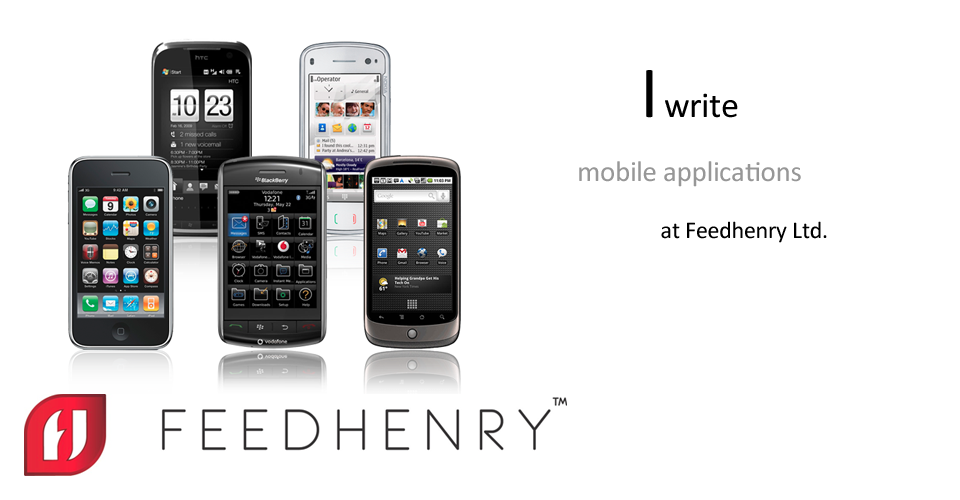
<style>
.page{position:relative;width:960px;height:500px;background:#ffffff}
.page>*{position:absolute;margin:0}
.t1{font:29px "Calibri";letter-spacing:-0.01em;color:#979797}
.t2{font:74px "Calibri";letter-spacing:-0.01em;color:#000000}
.t3{font:36px "Calibri";letter-spacing:-0.01em;color:#000000}
.t4{font:24px "Calibri";letter-spacing:-0.01em;color:#000000}
</style>
<div class="page">
<p class="t1" style="left:579px;top:70px;width:248px;height:173px;text-align:center"><span class="t2">I </span><span class="t3">write <br><br></span>mobile applications<br><span class="t4"><br> at Feedhenry Ltd.</span></p>
</div>
